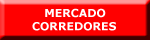
<style>
.page{position:relative;width:150px;height:40px;background:#ff0000}
.page>*{position:absolute;margin:0}
.t1{font:11px "Verdana-Bold";color:#ffffff}
.t2{font:12px "Verdana-Bold";color:#ffffff}
</style>
<div class="page">
<p class="t1" style="left:32px;top:8px;width:84px;height:23px"><span class="t2">   </span>MERCADO<br>CORREDORES</p>
</div>
